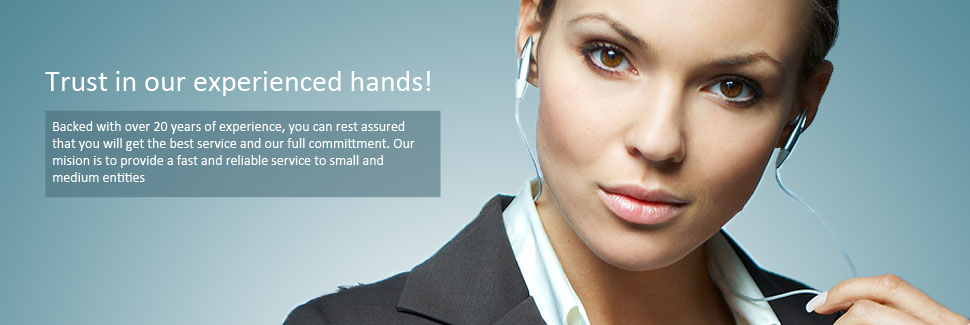
<style>
.page{position:relative;width:970px;height:325px}
.page>*{position:absolute;margin:0}
.t1{font:30px "Calibri";color:#ffffff}
.t2{font:14px "Calibri";color:#ffffff}
</style>
<div class="page">
<p class="t1" style="left:45px;top:71px;width:385px;height:25px">Trust in our experienced hands!</p>
<p class="t2" style="left:52px;top:121px;width:363px;height:61px">Backed with over 20 years of experience, you can rest assured that you will get the best service and our full committment. Our mision is to provide a fast and reliable service to small and medium entities</p>
</div>
